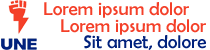
<style>
.page{position:relative;width:210px;height:50px;background:#ffffff}
.page>*{position:absolute;margin:0}
.t1{font:18.8px "BerlinSansFB-Reg";color:#f44029}
.t2{font:18.8px "BerlinSansFB-Reg";color:#00217c}
</style>
<div class="page">
<p class="t1" style="left:44px;top:2px;width:145px;height:16px">Lorem ipsum dolor</p>
<p class="t1" style="left:61px;top:19px;width:145px;height:16px">Lorem ipsum dolor</p>
<p class="t2" style="left:84px;top:35px;width:122px;height:15px">Sit amet, dolore</p>
</div>
